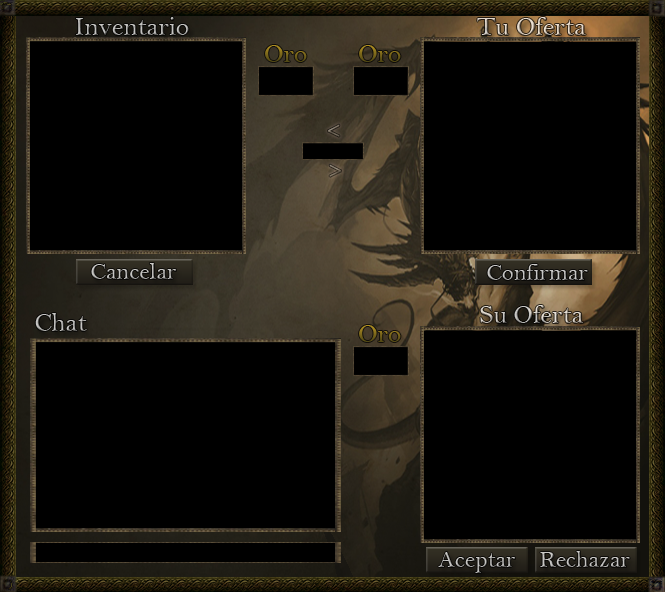
<style>
.page{position:relative;width:665px;height:592px;background:#000000}
.page>*{position:absolute;margin:0}
.t1{font:26.7px "BellMT"}
.t2{font:24px "MyriadPro-Regular";color:#7d6c57}
.t3{font:24px "BellMT"}
</style>
<div class="page">
<p class="t1" style="left:76px;top:17px;width:113px;height:18px">Inventario</p>
<p class="t1" style="left:477px;top:17px;width:109px;height:18px">Tu Oferta</p>
<p class="t1" style="left:265px;top:45px;width:42px;height:17px">Oro</p>
<p class="t1" style="left:359px;top:45px;width:42px;height:17px">Oro</p>
<p class="t2" style="left:328px;top:124px;width:12px;height:13px;opacity:0.74">&lt;</p>
<p class="t2" style="left:329px;top:164px;width:12px;height:13px;opacity:0.74">&gt;</p>
<p class="t3" style="left:91px;top:263px;width:85px;height:16px">Cancelar</p>
<p class="t3" style="left:487px;top:264px;width:101px;height:16px">Confirmar</p>
<p class="t1" style="left:480px;top:305px;width:104px;height:18px">Su Oferta</p>
<p class="t1" style="left:35px;top:313px;width:52px;height:18px">Chat</p>
<p class="t1" style="left:359px;top:325px;width:42px;height:17px">Oro</p>
<p class="t3" style="left:438px;top:552px;width:77px;height:21px">Aceptar</p>
<p class="t3" style="left:540px;top:551px;width:90px;height:16px">Rechazar</p>
</div>
